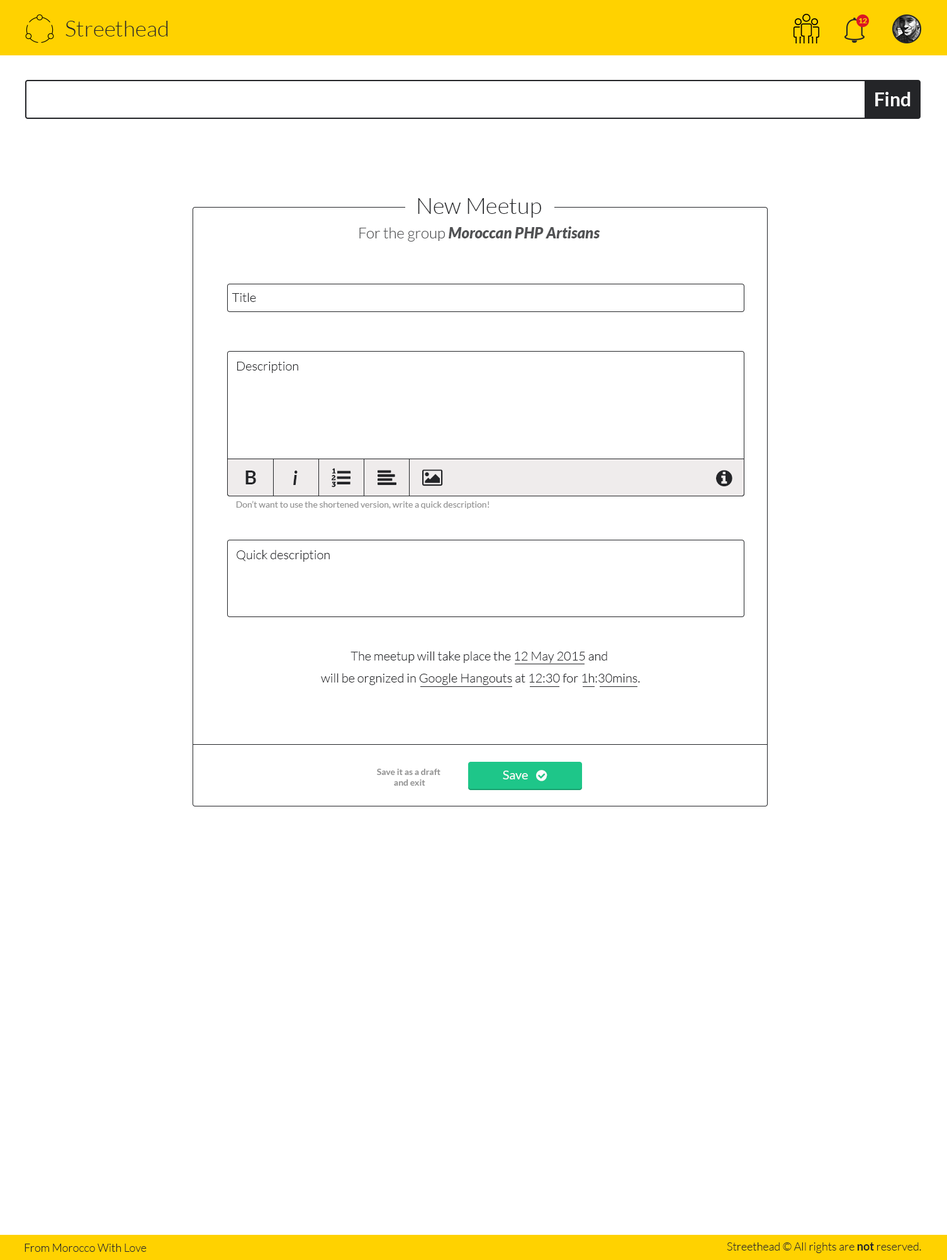
<style>
.page{position:relative;width:947px;height:1260px;background:#ffffff}
.page>*{position:absolute;margin:0}
.t1{font:22px "Lato-Light";color:#242528}
.t2{font:7.5px "Lato-Bold";color:#ffd200}
.t3{font:18.9px "Lato-Bold";color:#fcfcfc}
.t4{font:22.6px "Lato-Light";color:#242528}
.t5{font:15.1px "Lato-BlackItalic";color:#515254}
.t6{font:15.1px "Lato-Light";color:#515254}
.t7{font:12.6px "Lato-Light";color:#242528}
.t8{font:18.9px "Lato-Bold";color:#242528}
.t9{font:18.9px "Lato-BoldItalic";color:#242528}
.t10{font:8.8px "Lato-Regular";color:#939393}
.t11{font:12.6px/22px "Lato-Light";color:#242528}
.t12{font:8.8px "Lato-Bold";color:#939393}
.t13{font:12.6px "Lato-Regular";color:#fcfcfc}
.t14{font:11.3px "Lato-Light";color:#242528}
.t15{font:11.3px "Lato-Bold";color:#242528}
</style>
<div class="page">
<p class="t1" style="left:65px;top:21px;width:103px;height:15px">Streethead</p>
<p class="t2" style="left:859px;top:18px;width:8px;height:5px">12</p>
<p class="t3" style="left:875px;top:92px;width:35px;height:14px">Find</p>
<p class="t4" style="left:418px;top:198px;width:123px;height:20px">New Meetup</p>
<p class="t5" style="left:359px;top:226px;width:241px;height:16px"><span class="t6">For the group </span>Moroccan PHP Artisans</p>
<p class="t7" style="left:232px;top:292px;width:24px;height:10px">Title</p>
<p class="t7" style="left:237px;top:362px;width:61px;height:11px">Description</p>
<p class="t8" style="left:245px;top:470px;width:11px;height:14px">B</p>
<p class="t9" style="left:293px;top:470px;width:4px;height:15px">i</p>
<p class="t10" style="left:236px;top:501px;width:253px;height:8px">Don’t want to use the shortened version, write a quick description!</p>
<p class="t7" style="left:236px;top:550px;width:94px;height:12px">Quick description</p>
<p class="t11" style="left:321px;top:651px;width:319px;height:34px;text-align:center">The meetup will take place the 12 May 2015 and <br>will be orgnized in Google Hangouts at 12:30 for 1h:30mins.</p>
<p class="t12" style="left:377px;top:769px;width:63px;height:17px;text-align:center">Save it as a draft <br>and exit</p>
<p class="t13" style="left:503px;top:770px;width:25px;height:9px">Save</p>
<p class="t14" style="left:25px;top:1243px;width:122px;height:9px">From Morocco With Love</p>
<p class="t14" style="left:726px;top:1242px;width:195px;height:11px">Streethead © All rights are <span class="t15">not </span>reserved.</p>
</div>
